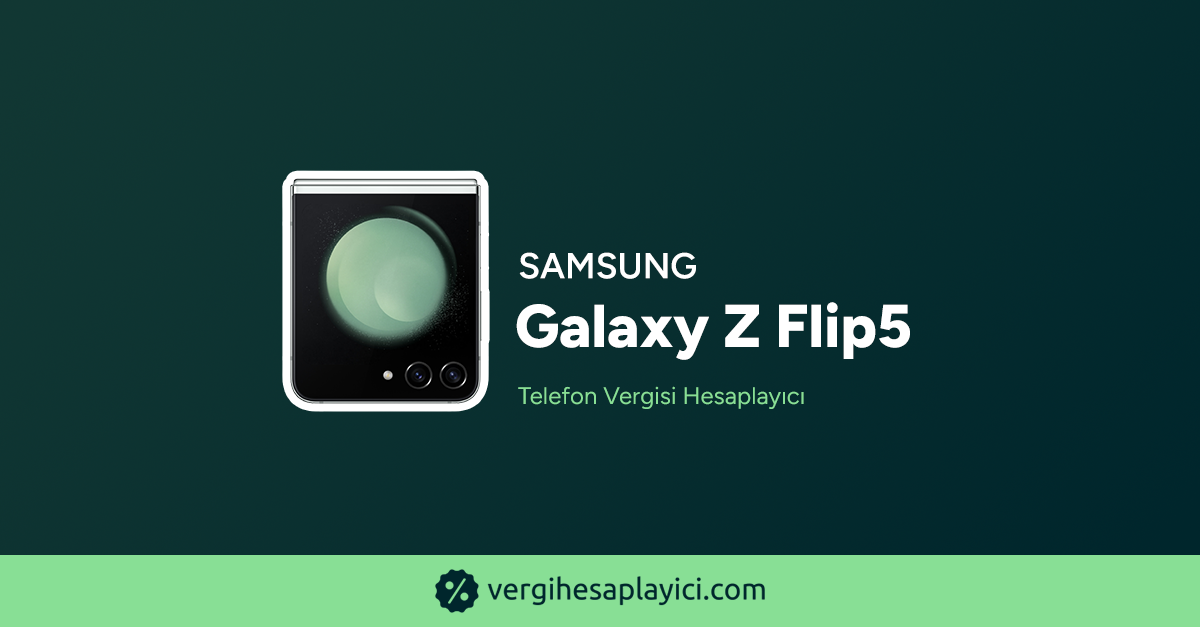
<style>
.page{position:relative;width:1200px;height:627px}
.page>*{position:absolute;margin:0}
.t1{font:36px "Figtree-SemiBold";color:#ffffff;text-transform:uppercase;font-weight:bold}
.t2{font:60.3px "Figtree-ExtraBold";color:#ffffff;font-weight:bold}
.t3{font:24px "Figtree-Regular";color:#88df95;font-weight:bold}
</style>
<div class="page">
<p class="t1" style="left:519px;top:252px;width:177px;height:27px">Samsung</p>
<p class="t2" style="left:516px;top:302px;width:394px;height:58px">Galaxy Z Flip5</p>
<p class="t3" style="left:518px;top:386px;width:286px;height:23px">Telefon Vergisi Hesaplayıcı</p>
</div>
